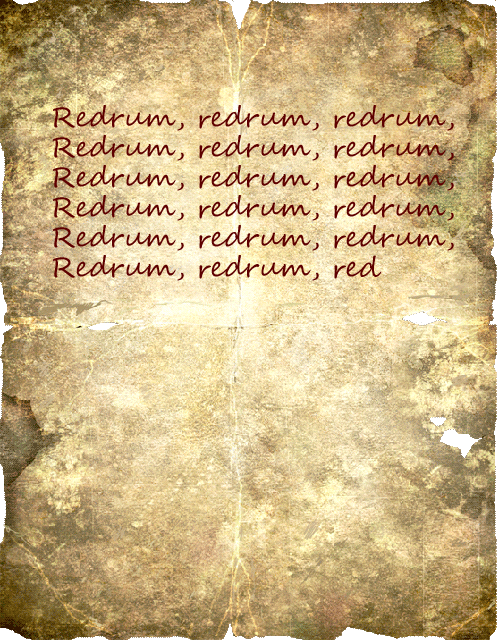
<style>
.page{position:relative;width:499px;height:640px}
.page>*{position:absolute;margin:0}
.t1{font:28px/30px "SegoeScript";color:#5e0000}
</style>
<div class="page">
<p class="t1" style="left:53px;top:105px;width:401px;height:176px">Redrum, redrum, redrum,<br>Redrum, redrum, redrum,<br>Redrum, redrum, redrum,<br>Redrum, redrum, redrum,<br>Redrum, redrum, redrum,<br>Redrum, redrum, red</p>
</div>
